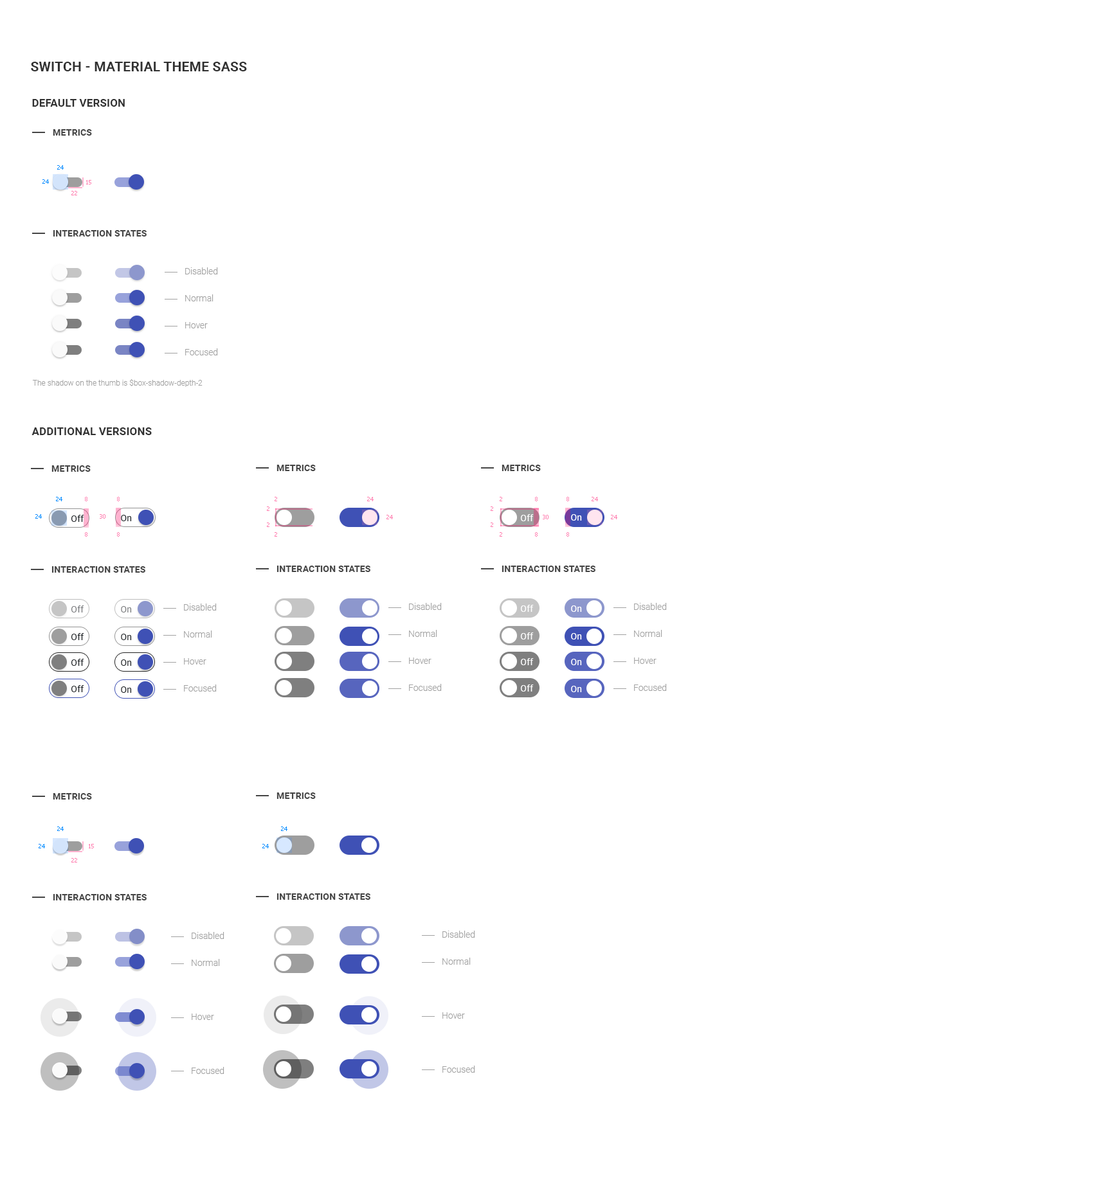
<style>
.page{position:relative;width:1115px;height:1180px;background:#ffffff}
.page>*{position:absolute;margin:0}
.t1{font:13.5px "Roboto-Bold";letter-spacing:0.01em;color:#313131;text-transform:uppercase}
.t2{font:10.9px "Roboto-Bold";letter-spacing:0.01em;color:#313131;text-transform:uppercase}
.t3{font:9px "Roboto-Bold";letter-spacing:0.01em;color:#454545;text-transform:uppercase}
.t4{font:5.8px "Tahoma";color:#008aff}
.t5{font:5.8px "Tahoma";color:#ff7cae}
.t6{font:9px/27px "Roboto-Light";color:#a1a1a1}
.t7{font:7.7px "Roboto-Light";color:#a1a1a1}
.t8{font:9px "Roboto-Regular";letter-spacing:0.01em;color:#212529}
.t9{font:9px "Roboto-Regular";letter-spacing:0.01em;color:#ffffff}
.t10{font:9px "Roboto-Regular";letter-spacing:0.01em;color:#7a7c7f}
.t11{font:9px "Roboto-Regular";letter-spacing:0.01em;color:#7a7c7e}
.t12{font:9px "Roboto-Regular";letter-spacing:0.01em;color:#fefeff}
</style>
<div class="page">
<p class="t1" style="left:31px;top:62px;width:216px;height:9px">switch - material theme sass</p>
<p class="t2" style="left:32px;top:99px;width:93px;height:8px">default version</p>
<p class="t3" style="left:53px;top:129px;width:39px;height:7px">Metrics</p>
<p class="t4" style="left:57px;top:165px;width:7px;height:5px">24</p>
<p class="t4" style="left:42px;top:179px;width:7px;height:5px">24</p>
<p class="t5" style="left:86px;top:180px;width:5px;height:4px">15</p>
<p class="t5" style="left:71px;top:191px;width:6px;height:4px">22</p>
<p class="t3" style="left:53px;top:230px;width:94px;height:7px">Interaction states</p>
<p class="t6" style="left:185px;top:267px;width:33px;height:89px">Disabled<br>Normal<br>Hover<br>Focused</p>
<p class="t7" style="left:32px;top:379px;width:171px;height:8px">The shadow on the thumb is $box-shadow-depth-2</p>
<p class="t2" style="left:32px;top:428px;width:120px;height:7px">additional versions</p>
<p class="t3" style="left:51px;top:465px;width:40px;height:7px">Metrics</p>
<p class="t3" style="left:276px;top:465px;width:40px;height:6px">Metrics</p>
<p class="t3" style="left:501px;top:465px;width:40px;height:6px">Metrics</p>
<p class="t4" style="left:56px;top:497px;width:6px;height:4px">24</p>
<p class="t5" style="left:85px;top:497px;width:2px;height:4px">8</p>
<p class="t5" style="left:117px;top:497px;width:3px;height:4px">8</p>
<p class="t5" style="left:274px;top:497px;width:3px;height:4px">2</p>
<p class="t5" style="left:367px;top:497px;width:7px;height:4px">24</p>
<p class="t5" style="left:500px;top:497px;width:2px;height:4px">2</p>
<p class="t5" style="left:535px;top:497px;width:2px;height:4px">8</p>
<p class="t5" style="left:566px;top:497px;width:3px;height:4px">8</p>
<p class="t5" style="left:591px;top:497px;width:7px;height:4px">24</p>
<p class="t5" style="left:267px;top:507px;width:2px;height:4px">2</p>
<p class="t5" style="left:491px;top:507px;width:2px;height:4px">2</p>
<p class="t4" style="left:35px;top:514px;width:7px;height:5px">24</p>
<p class="t8" style="left:71px;top:515px;width:13px;height:7px">Off</p>
<p class="t5" style="left:100px;top:514px;width:5px;height:5px">30</p>
<p class="t8" style="left:121px;top:515px;width:11px;height:6px">On</p>
<p class="t5" style="left:386px;top:515px;width:7px;height:4px">24</p>
<p class="t9" style="left:520px;top:514px;width:14px;height:7px">Off</p>
<p class="t5" style="left:543px;top:515px;width:5px;height:4px">30</p>
<p class="t9" style="left:571px;top:514px;width:11px;height:7px">On</p>
<p class="t5" style="left:611px;top:515px;width:6px;height:4px">24</p>
<p class="t5" style="left:85px;top:532px;width:2px;height:5px">8</p>
<p class="t5" style="left:117px;top:532px;width:3px;height:5px">8</p>
<p class="t5" style="left:267px;top:523px;width:2px;height:4px">2</p>
<p class="t5" style="left:274px;top:532px;width:3px;height:5px">2</p>
<p class="t5" style="left:491px;top:523px;width:2px;height:4px">2</p>
<p class="t5" style="left:500px;top:532px;width:2px;height:5px">2</p>
<p class="t5" style="left:535px;top:532px;width:2px;height:5px">8</p>
<p class="t5" style="left:566px;top:532px;width:3px;height:5px">8</p>
<p class="t3" style="left:51px;top:566px;width:94px;height:7px">Interaction states</p>
<p class="t3" style="left:276px;top:566px;width:94px;height:6px">Interaction states</p>
<p class="t3" style="left:501px;top:566px;width:94px;height:6px">Interaction states</p>
<p class="t10" style="left:71px;top:606px;width:13px;height:7px">Off</p>
<p class="t6" style="left:184px;top:604px;width:33px;height:88px">Disabled<br>Normal<br>Hover<br>Focused</p>
<p class="t6" style="left:409px;top:603px;width:33px;height:88px">Disabled<br>Normal<br>Hover<br>Focused</p>
<p class="t9" style="left:520px;top:605px;width:14px;height:7px">Off</p>
<p class="t9" style="left:571px;top:606px;width:11px;height:6px">On</p>
<p class="t6" style="left:634px;top:603px;width:33px;height:88px">Disabled<br>Normal<br>Hover<br>Focused</p>
<p class="t11" style="left:121px;top:606px;width:11px;height:7px">On</p>
<p class="t8" style="left:71px;top:633px;width:13px;height:7px">Off</p>
<p class="t8" style="left:121px;top:634px;width:11px;height:6px">On</p>
<p class="t9" style="left:520px;top:633px;width:14px;height:7px">Off</p>
<p class="t9" style="left:571px;top:633px;width:11px;height:7px">On</p>
<p class="t8" style="left:71px;top:659px;width:13px;height:7px">Off</p>
<p class="t8" style="left:121px;top:660px;width:11px;height:6px">On</p>
<p class="t12" style="left:520px;top:658px;width:14px;height:7px">Off</p>
<p class="t9" style="left:571px;top:659px;width:11px;height:6px">On</p>
<p class="t8" style="left:71px;top:685px;width:13px;height:7px">Off</p>
<p class="t8" style="left:121px;top:687px;width:11px;height:6px">On</p>
<p class="t9" style="left:520px;top:685px;width:14px;height:7px">Off</p>
<p class="t9" style="left:571px;top:686px;width:11px;height:6px">On</p>
<p class="t3" style="left:53px;top:793px;width:39px;height:7px">Metrics</p>
<p class="t3" style="left:276px;top:793px;width:40px;height:6px">Metrics</p>
<p class="t4" style="left:57px;top:827px;width:7px;height:4px">24</p>
<p class="t4" style="left:281px;top:827px;width:6px;height:4px">24</p>
<p class="t4" style="left:39px;top:844px;width:6px;height:5px">24</p>
<p class="t5" style="left:89px;top:844px;width:5px;height:5px">15</p>
<p class="t4" style="left:262px;top:844px;width:7px;height:5px">24</p>
<p class="t5" style="left:71px;top:858px;width:6px;height:5px">22</p>
<p class="t3" style="left:276px;top:894px;width:94px;height:6px">Interaction states</p>
<p class="t3" style="left:53px;top:894px;width:94px;height:7px">Interaction states</p>
<p class="t6" style="left:192px;top:932px;width:32px;height:142px">Disabled<br>Normal<br><br>Hover<br><br>Focused</p>
<p class="t6" style="left:442px;top:931px;width:33px;height:142px">Disabled<br>Normal<br><br>Hover<br><br>Focused</p>
</div>
